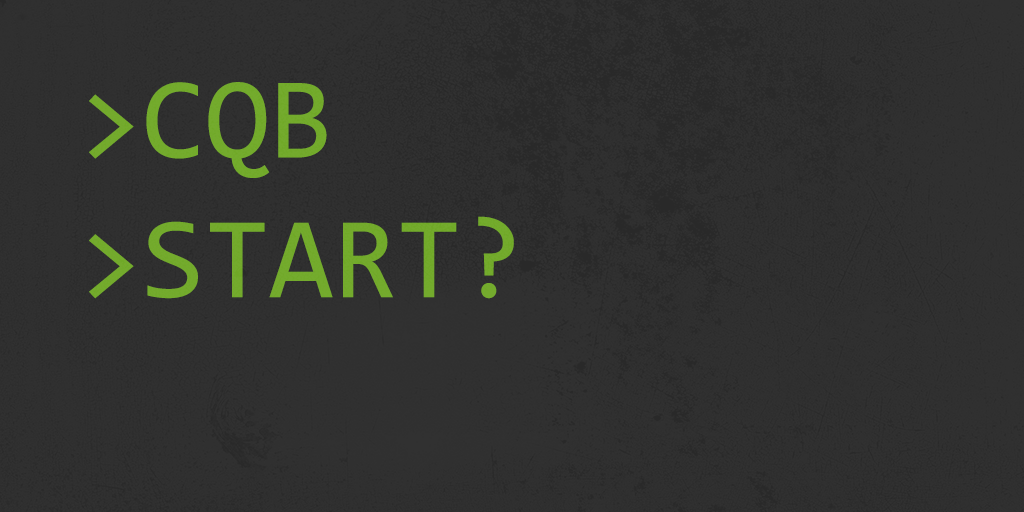
<style>
.page{position:relative;width:1024px;height:512px;background:#303030}
.page>*{position:absolute;margin:0}
.t1{font:116.4px "Consolas";color:#6fa826}
</style>
<div class="page">
<p class="t1" style="left:89px;top:82px;width:425px;height:217px">&gt;CQB<br>&gt;START?</p>
</div>
